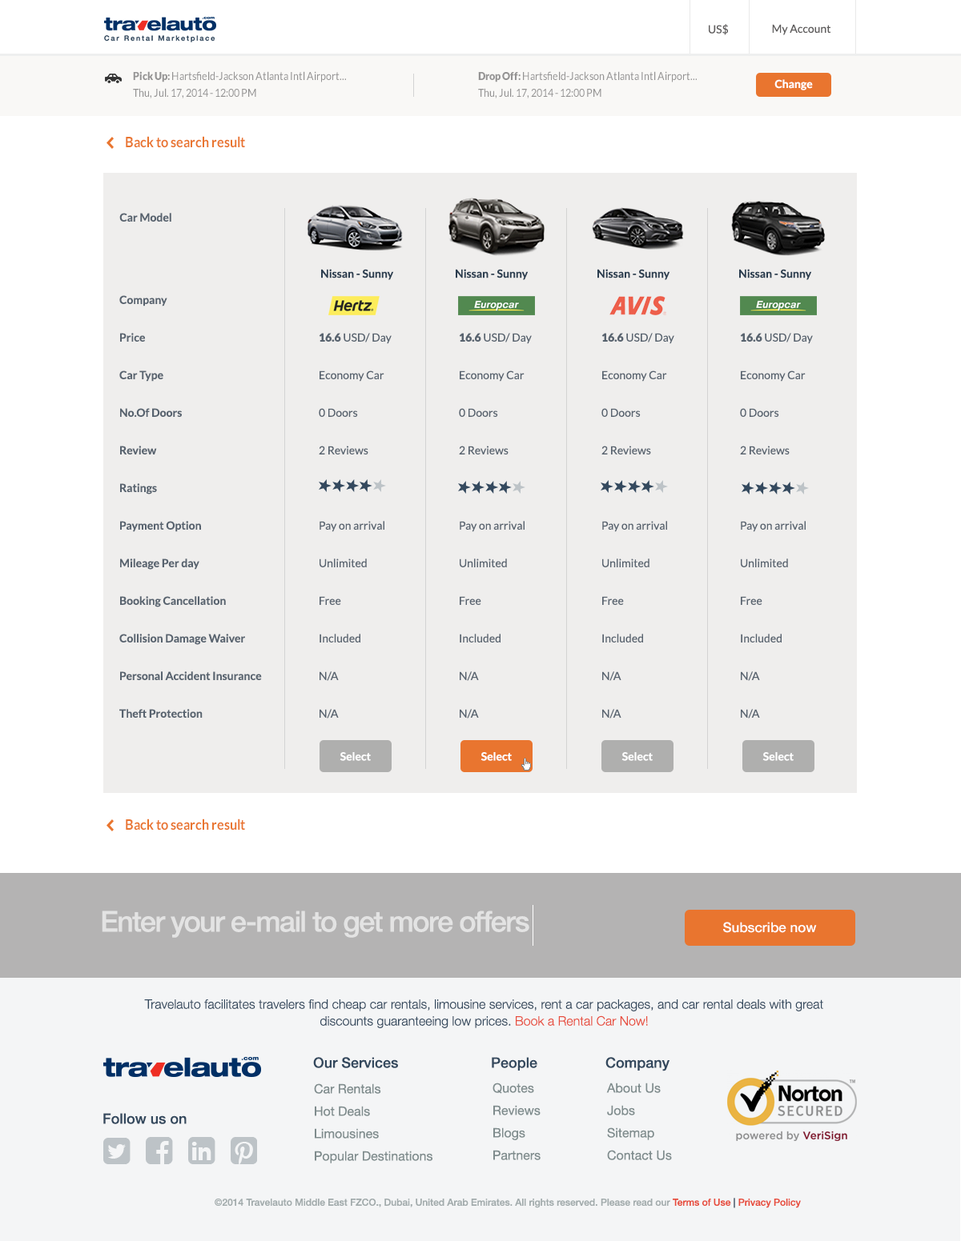
<style>
.page{position:relative;width:961px;height:1241px;background:#efeeed}
.page>*{position:absolute;margin:0}
.t1{font:11.2px "Lato-Regular";color:#5d5b5b}
.t2{font:11.2px/16.8px "Lato-Regular";color:#949393;scale:0.9 1}
.t3{font:11.2px/16.8px "Lato-Black";color:#949393;scale:0.9 1}
.t4{font:11.2px "Lato-Bold";color:#ffffff}
.t5{font:14.4px "Lato-Bold";color:#e9752f;scale:0.9 1}
.t6{font:11.2px "Lato-Bold";color:#58636f}
.t7{font:11.2px "Lato-Bold";color:#2c3e50}
.t8{font:11.2px/37.6px "Lato-Bold";color:#58636f}
.t9{font:11.2px/37.6px "Lato-Regular";color:#58636f}
.t10{font:11.2px/37.6px "Lato-Black";color:#58636f}
.t11{font:28.8px "HelveticaNeue-Medium";letter-spacing:-0.04em;color:#e3e3e3}
.t12{font:13.6px "HelveticaNeue-Medium";color:#ffffff}
.t13{font:12.8px/16.8px "HelveticaNeue-Light";color:#34495e}
.t14{font:12.8px/16.8px "HelveticaNeue-Light";color:#e74c3c}
.t15{font:14.4px "HelveticaNeue-Medium";color:#34495e}
.t16{font:12.8px/22.4px "HelveticaNeue";color:#7f8c8d}
.t17{font:9.6px "HelveticaNeue-Medium";color:#a2abac}
.t18{font:9.6px "HelveticaNeue-Medium";color:#e74c3c}
.t19{font:9.6px "HelveticaNeue-Medium";color:#34495e}
</style>
<div class="page">
<p class="t1" style="left:708px;top:24px;width:20px;height:11px">US$</p>
<p class="t1" style="left:772px;top:24px;width:59px;height:11px">My Account</p>
<p class="t2" style="left:133px;top:71px;width:213px;height:27px"><span class="t3">Pick Up: </span>Hartsfield-Jackson Atlanta Intl Airport...<br>Thu, Jul. 17, 2014 - 12:00 PM</p>
<p class="t2" style="left:478px;top:71px;width:218px;height:27px"><span class="t3">Drop Off: </span>Hartsfield-Jackson Atlanta Intl Airport...<br>Thu, Jul. 17, 2014 - 12:00 PM</p>
<p class="t4" style="left:774px;top:79px;width:38px;height:11px">Change</p>
<p class="t5" style="left:126px;top:136px;width:119px;height:12px">Back to search result</p>
<p class="t6" style="left:119px;top:213px;width:52px;height:9px">Car Model</p>
<p class="t7" style="left:321px;top:269px;width:73px;height:11px">Nissan - Sunny</p>
<p class="t7" style="left:455px;top:269px;width:73px;height:11px">Nissan - Sunny</p>
<p class="t7" style="left:597px;top:269px;width:73px;height:11px">Nissan - Sunny</p>
<p class="t7" style="left:739px;top:269px;width:73px;height:11px">Nissan - Sunny</p>
<p class="t8" style="left:119px;top:295px;width:143px;height:423px">Company<br>Price<br>Car Type<br>No.Of Doors<br>Review<br>Ratings<br>Payment Option<br>Mileage Per day<br>Booking Cancellation<br>Collision Damage Waiver<br>Personal Accident Insurance<br>Theft Protection</p>
<p class="t9" style="left:319px;top:333px;width:72px;height:386px"><span class="t10">16.6</span> USD/ Day<br>Economy Car<br>0 Doors<br>2 Reviews<br>     <br>Pay on arrival<br>Unlimited<br>Free<br>Included<br>N/A<br>N/A</p>
<p class="t9" style="left:459px;top:333px;width:72px;height:386px"><span class="t10">16.6</span> USD/ Day<br>Economy Car<br>0 Doors<br>2 Reviews<br>     <br>Pay on arrival<br>Unlimited<br>Free<br>Included<br>N/A<br>N/A</p>
<p class="t9" style="left:601px;top:333px;width:73px;height:386px"><span class="t10">16.6</span> USD/ Day<br>Economy Car<br>0 Doors<br>2 Reviews<br>     <br>Pay on arrival<br>Unlimited<br>Free<br>Included<br>N/A<br>N/A</p>
<p class="t9" style="left:740px;top:333px;width:72px;height:386px"><span class="t10">16.6</span> USD/ Day<br>Economy Car<br>0 Doors<br>2 Reviews<br>     <br>Pay on arrival<br>Unlimited<br>Free<br>Included<br>N/A<br>N/A</p>
<p class="t4" style="left:339px;top:752px;width:32px;height:9px">Select</p>
<p class="t4" style="left:480px;top:752px;width:31px;height:9px">Select</p>
<p class="t4" style="left:621px;top:752px;width:31px;height:9px">Select</p>
<p class="t4" style="left:762px;top:752px;width:31px;height:9px">Select</p>
<p class="t5" style="left:126px;top:819px;width:119px;height:12px">Back to search result</p>
<p class="t11" style="left:102px;top:911px;width:427px;height:27px">Enter your e-mail to get more offers</p>
<p class="t12" style="left:723px;top:922px;width:93px;height:11px">Subscribe now</p>
<p class="t13" style="left:144px;top:1000px;width:679px;height:29px;text-align:center">Travelauto facilitates travelers find cheap car rentals, limousine services, rent a car packages, and car rental deals with great discounts guaranteeing low prices. <span class="t14">Book a Rental Car Now!</span></p>
<p class="t15" style="left:313px;top:1057px;width:85px;height:12px">Our Services</p>
<p class="t15" style="left:491px;top:1057px;width:46px;height:14px">People</p>
<p class="t15" style="left:605px;top:1057px;width:64px;height:15px">Company</p>
<p class="t16" style="left:314px;top:1084px;width:118px;height:80px">Car Rentals<br>Hot Deals<br>Limousines<br>Popular Destinations</p>
<p class="t16" style="left:492px;top:1083px;width:48px;height:78px">Quotes<br>Reviews<br>Blogs<br>Partners</p>
<p class="t16" style="left:606px;top:1083px;width:66px;height:78px">About Us<br>Jobs<br>Sitemap<br>Contact Us</p>
<p class="t15" style="left:103px;top:1113px;width:83px;height:12px">Follow us on</p>
<p class="t17" style="left:215px;top:1198px;width:585px;height:11px">©2014 Travelauto Middle East FZCO., Dubai, United Arab Emirates. All rights reserved. Please read our <span class="t18">Terms of Use</span><span class="t19"> | </span><span class="t18">Privacy Policy</span></p>
</div>
